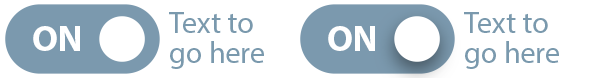
<style>
.page{position:relative;width:590px;height:78px;background:#ffffff}
.page>*{position:absolute;margin:0}
.t1{font:30px/30px "MyriadPro-Regular";color:#7b99ae}
.t2{font:36px "MyriadPro-Bold";color:#ffffff}
</style>
<div class="page">
<p class="t1" style="left:169px;top:12px;width:95px;height:57px">Text to go here</p>
<p class="t1" style="left:464px;top:12px;width:95px;height:57px">Text to go here</p>
<p class="t2" style="left:33px;top:26px;width:47px;height:25px">ON</p>
<p class="t2" style="left:328px;top:26px;width:47px;height:25px">ON</p>
</div>
